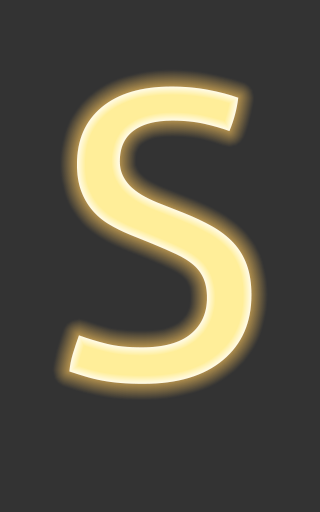
<style>
.page{position:relative;width:320px;height:512px;background:#333333}
.page>*{position:absolute;margin:0}
.t1{font:400px "Aller-Regular"}
</style>
<div class="page">
<p class="t1" style="left:69px;top:86px;width:183px;height:298px">S</p>
</div>
